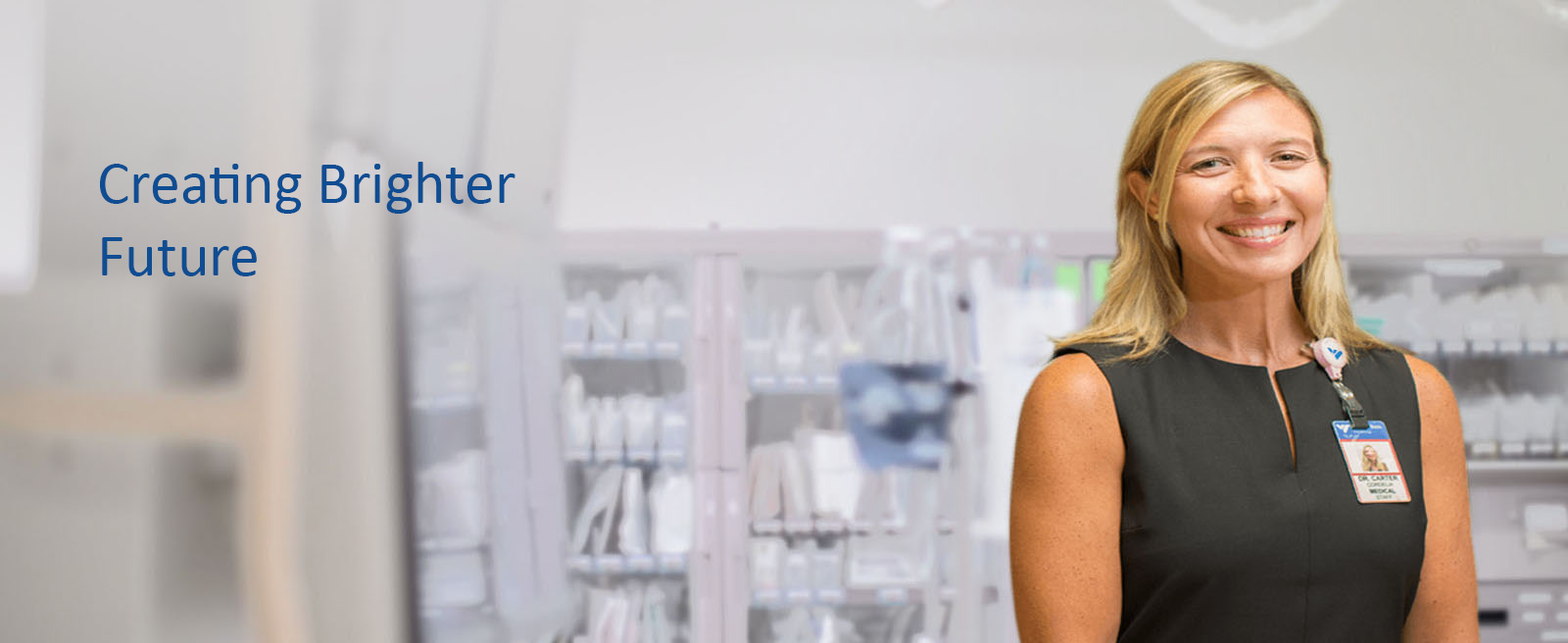
<style>
.page{position:relative;width:1568px;height:643px}
.page>*{position:absolute;margin:0}
.t1{font:60.8px "Calibri";color:#0f4d92}
</style>
<div class="page">
<p class="t1" style="left:100px;top:162px;width:415px;height:114px">Creating Brighter <br>Future</p>
</div>
